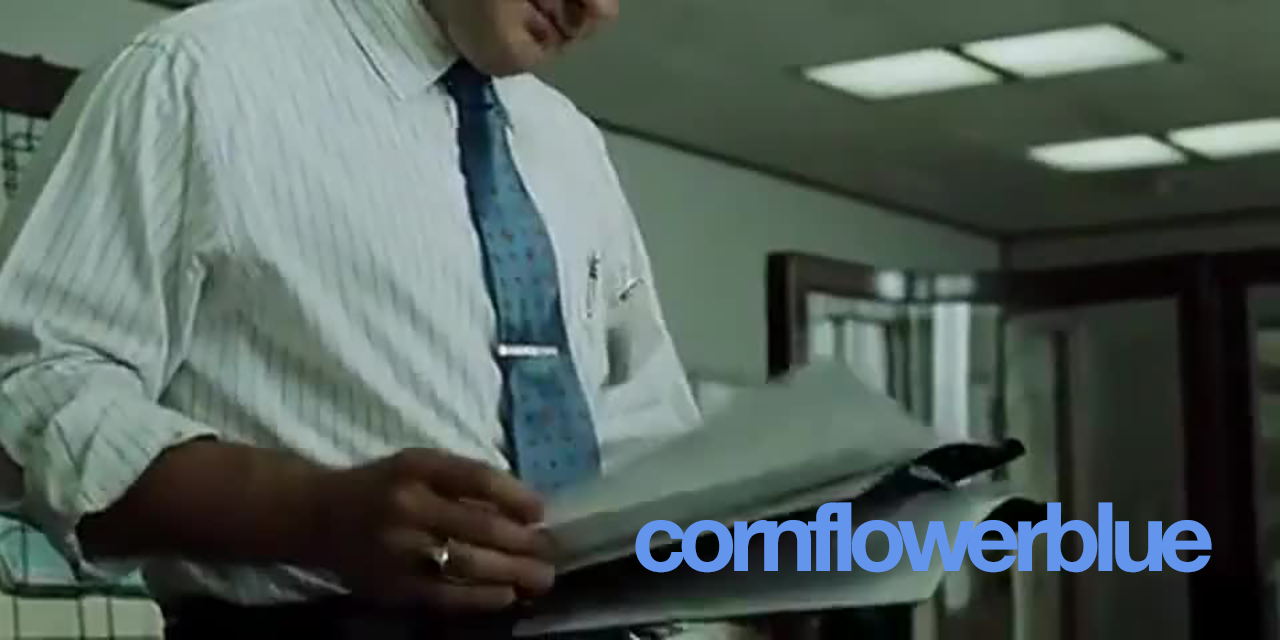
<style>
.page{position:relative;width:1280px;height:640px}
.page>*{position:absolute;margin:0}
.t1{font:96px "HelveticaNeue-Bold";letter-spacing:-0.075em;color:#6495ed}
</style>
<div class="page">
<p class="t1" style="left:635px;top:502px;width:577px;height:71px">cornflowerblue</p>
</div>
